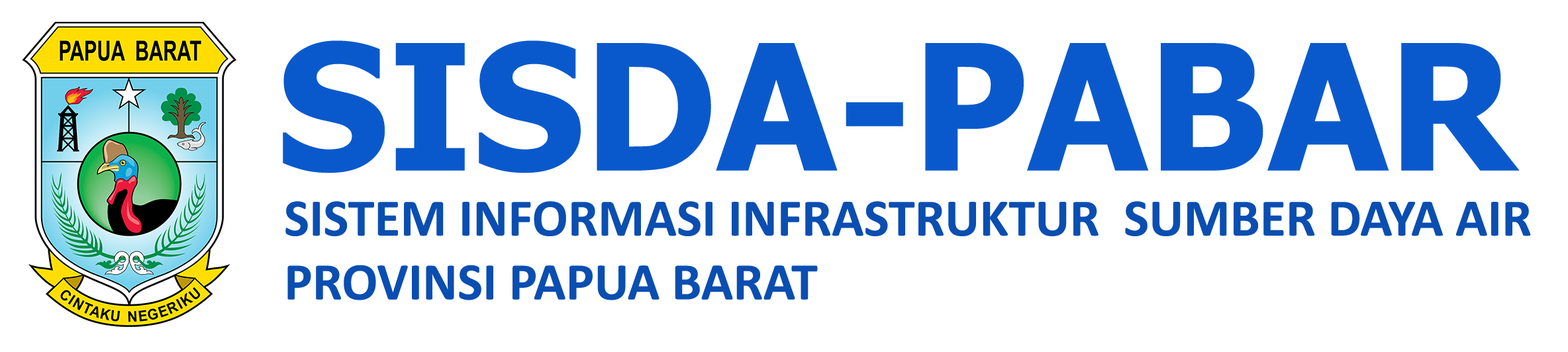
<style>
.page{position:relative;width:1568px;height:352px;background:#ffffff}
.page>*{position:absolute;margin:0}
.t1{font:175.4px "Tahoma-Bold";color:#0a59cc}
.t2{font:53.2px "Calibri-Bold";color:#0a4eb1}
</style>
<div class="page">
<p class="t1" style="left:283px;top:40px;width:1237px;height:133px">SISDA-PABAR</p>
<p class="t2" style="left:285px;top:201px;width:1246px;height:100px">SISTEM INFORMASI INFRASTRUKTUR  SUMBER DAYA AIR<br>PROVINSI PAPUA BARAT</p>
</div>
